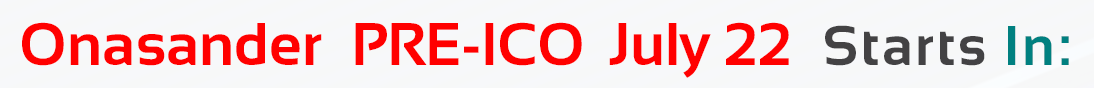
<style>
.page{position:relative;width:1094px;height:88px;background:#f7f8fa}
.page>*{position:absolute;margin:0}
.t1{font:60px "Sansation-Bold";color:#ff0000}
.t2{font:60px "Sansation-Bold";letter-spacing:-0.01em;color:#ff0000}
.t3{font:56px "Sansation-Bold";letter-spacing:0.05em;color:#434244}
.t4{font:56px "Sansation-Bold";letter-spacing:0.05em;color:#008080}
</style>
<div class="page">
<p class="t1" style="left:22px;top:22px;width:300px;height:44px">Onasander</p>
<p class="t2" style="left:355px;top:22px;width:434px;height:56px">PRE-ICO  July 22</p>
<p class="t3" style="left:825px;top:25px;width:244px;height:41px">Starts <span class="t4">In:</span></p>
</div>
